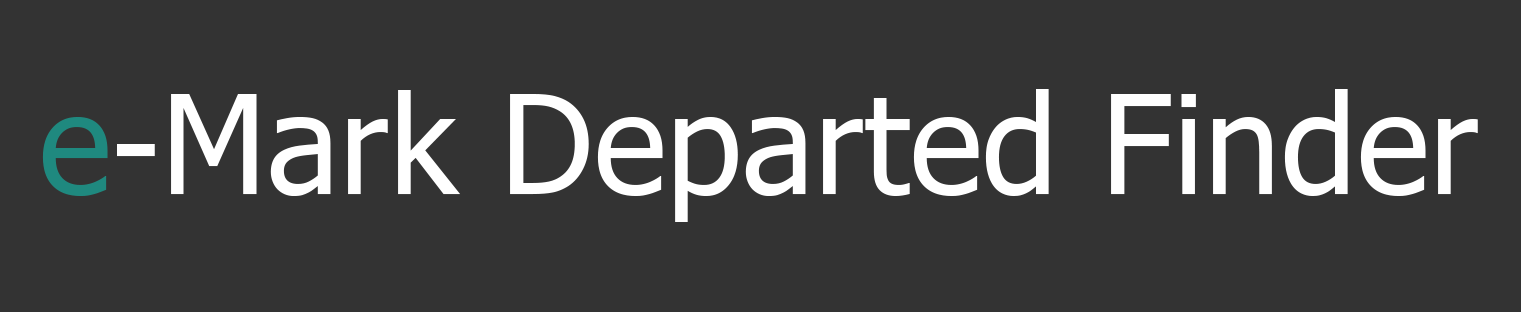
<style>
.page{position:relative;width:1521px;height:312px;background:#333333}
.page>*{position:absolute;margin:0}
.t1{font:137.5px "Tahoma";color:#ffffff}
.t2{font:137.5px "Tahoma";color:#1f897f}
</style>
<div class="page">
<p class="t1" style="left:42px;top:89px;width:1436px;height:133px"><span class="t2">e</span>-Mark Departed Finder</p>
</div>
